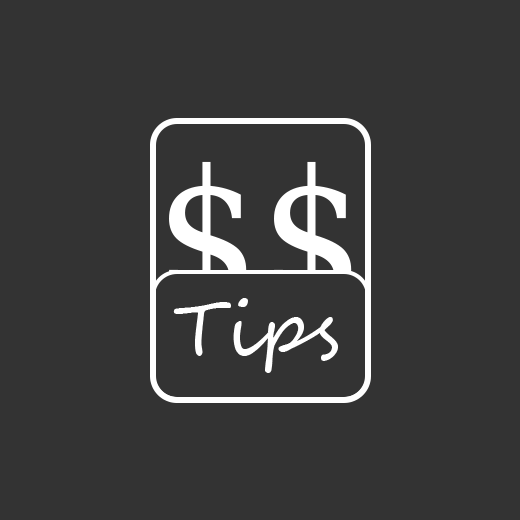
<style>
.page{position:relative;width:520px;height:520px;background:#333333}
.page>*{position:absolute;margin:0}
.t1{font:75px "SegoeScript";color:#ffffff}
</style>
<div class="page">
<p class="t1" style="left:173px;top:298px;width:165px;height:75px">Tips</p>
</div>
